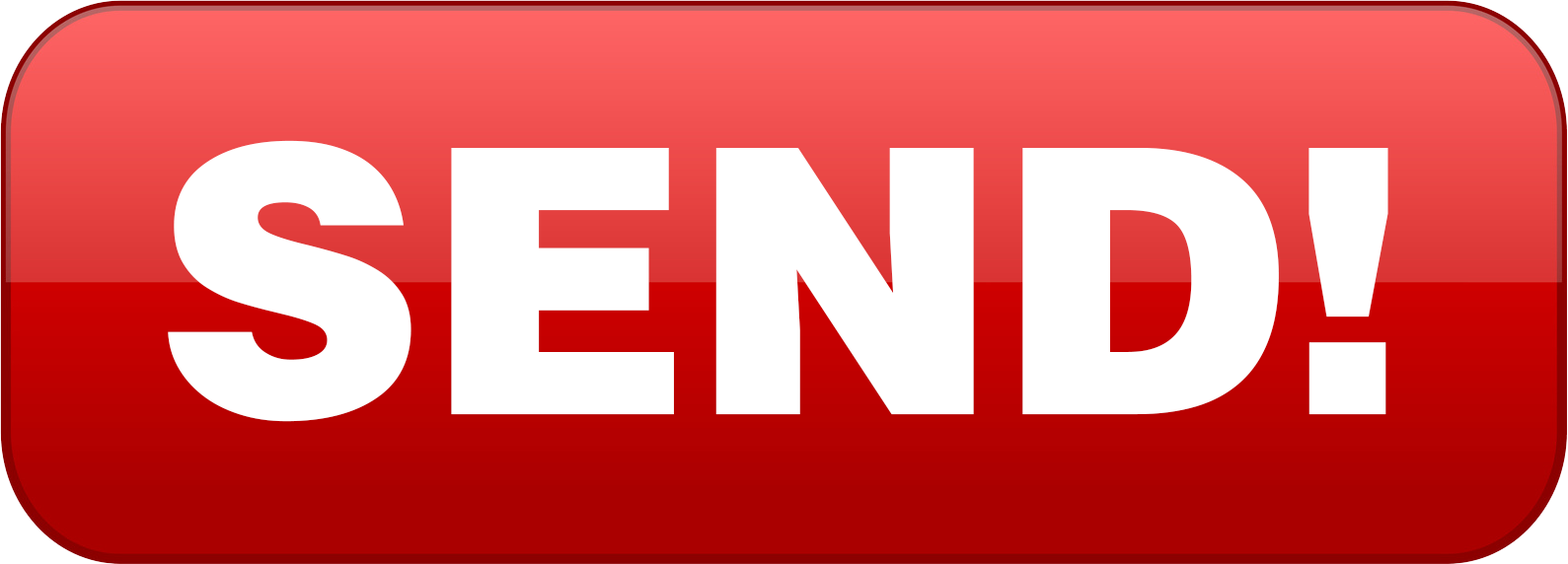
<style>
.page{position:relative;width:1568px;height:564px;background:#ffffff}
.page>*{position:absolute;margin:0}
.t1{font:370px "Helvetica-Black";color:#ffffff;text-transform:uppercase}
</style>
<div class="page">
<p class="t1" style="left:168px;top:140px;width:1220px;height:282px">Send!</p>
</div>
